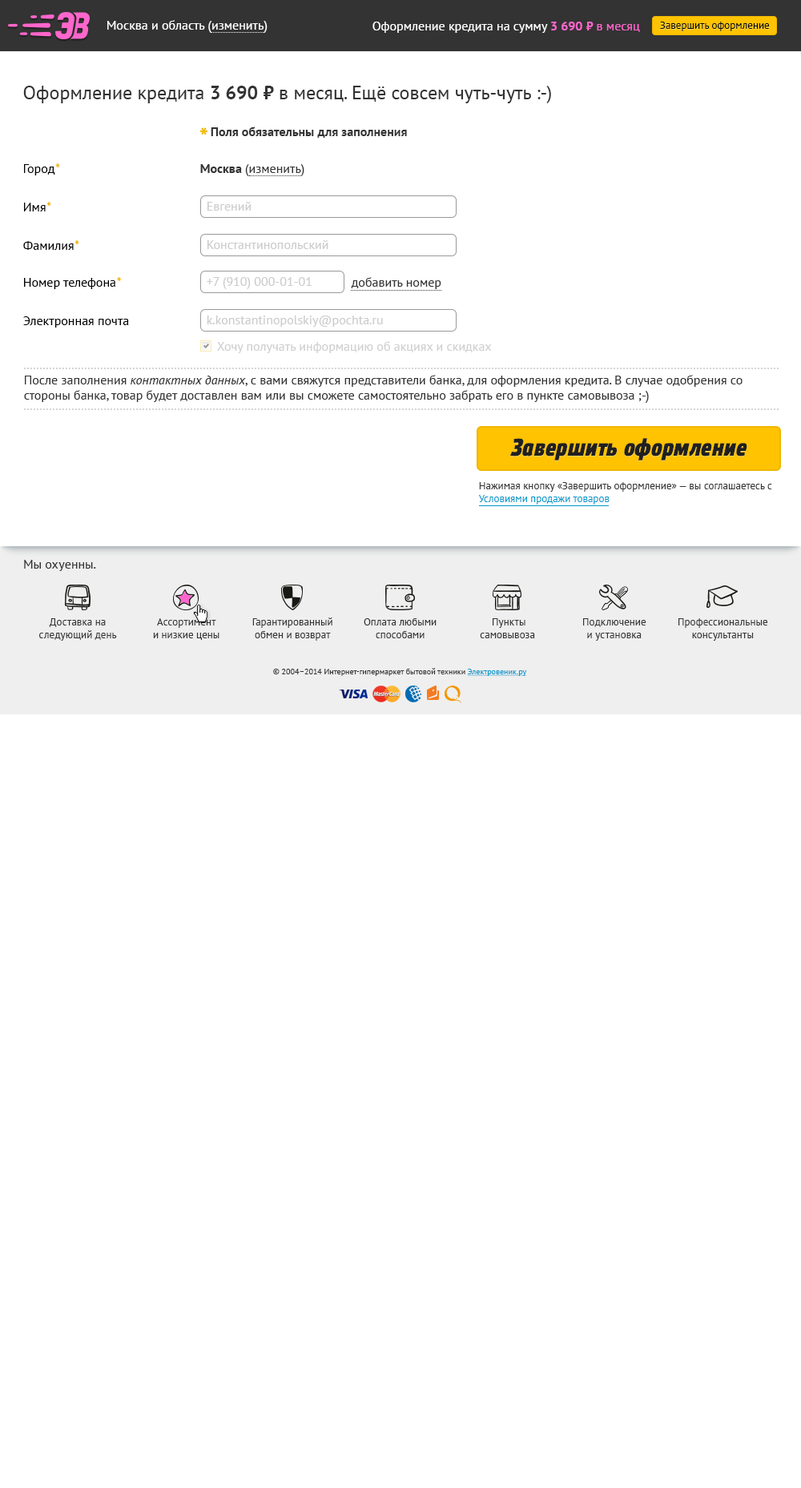
<style>
.page{position:relative;width:801px;height:1488px;background:#ffffff}
.page>*{position:absolute;margin:0}
.t1{font:12.8px "PTSans-Regular";color:#ffffff}
.t2{font:12.8px "PTSans-Bold";color:#ff66cc}
.t3{font:12.8px "PTSans-Regular";color:#ff66cc}
.t4{font:10.4px "PTSans-Regular";color:#000000}
.t5{font:19.2px "PTSans-Regular";color:#333333}
.t6{font:19.2px "PTSans-Bold";color:#333333}
.t7{font:12.8px "PTSans-Bold";color:#333333}
.t8{font:12.8px "PTSans-Regular";color:#000000}
.t9{font:12.8px "PTSans-BoldItalic";color:#efb700}
.t10{font:12.8px "PTSans-Regular";color:#333333}
.t11{font:12.8px "PTSans-Regular";color:#cccccc}
.t12{font:12.8px "PTSans-Regular";color:#d0d0d0}
.t13{font:12.8px "PTSans-Italic";color:#333333}
.t14{font:24px "EtelkaNarrowMedium-BoldItalic";letter-spacing:0.025em;color:#202020}
.t15{font:10.4px/12.8px "PTSans-Regular";color:#333333}
.t16{font:10.4px/12.8px "PTSans-Regular";color:#0099cc}
.t17{font:10.4px/12.9px "PTSans-Regular";color:#333333}
.t18{font:10.5px/12.9px "PTSans-Regular";color:#333333}
.t19{font:8px "PTSans-Regular";color:#333333}
.t20{font:8px "PTSans-Regular";color:#0099cc;text-decoration:underline}
</style>
<div class="page">
<p class="t1" style="left:107px;top:20px;width:161px;height:13px">Москва и область (изменить)</p>
<p class="t1" style="left:373px;top:22px;width:267px;height:11px">Оформление кредита на сумму <span class="t2">3 690 ⃏ </span><span class="t3">в месяц</span></p>
<p class="t4" style="left:660px;top:22px;width:110px;height:9px">Завершить оформление</p>
<p class="t5" style="left:23px;top:86px;width:528px;height:17px">Оформление кредита <span class="t6">3 690 ⃏ </span>в месяц. Ещё совсем чуть-чуть :-)</p>
<p class="t7" style="left:211px;top:127px;width:196px;height:11px">Поля обязательны для заполнения</p>
<p class="t8" style="left:24px;top:163px;width:36px;height:12px">Город<span class="t9">*</span></p>
<p class="t10" style="left:200px;top:164px;width:104px;height:12px"><span class="t7">Москва </span>(изменить)</p>
<p class="t8" style="left:24px;top:202px;width:27px;height:9px">Имя<span class="t9">*</span></p>
<p class="t11" style="left:207px;top:202px;width:45px;height:9px">Евгений</p>
<p class="t8" style="left:23px;top:240px;width:56px;height:10px">Фамилия<span class="t9">*</span></p>
<p class="t11" style="left:207px;top:240px;width:121px;height:9px">Константинопольский</p>
<p class="t8" style="left:24px;top:277px;width:98px;height:12px">Номер телефона<span class="t9">*</span></p>
<p class="t11" style="left:207px;top:277px;width:105px;height:12px">+7 (910) 000-01-01</p>
<p class="t10" style="left:351px;top:277px;width:90px;height:12px">добавить номер</p>
<p class="t8" style="left:23px;top:316px;width:106px;height:12px">Электронная почта</p>
<p class="t11" style="left:207px;top:316px;width:176px;height:11px">k.konstantinopolskiy@pochta.ru</p>
<p class="t12" style="left:217px;top:341px;width:275px;height:12px">Хочу получать информацию об акциях и скидках</p>
<p class="t10" style="left:24px;top:375px;width:719px;height:28px">После заполнения <span class="t13">контактных данных</span>, с вами свяжутся представители банка, для оформления кредита. В случае одобрения со<br>стороны банка, товар будет доставлен вам или вы сможете самостоятельно забрать его в пункте самовывоза ;-)</p>
<p class="t14" style="left:510px;top:438px;width:237px;height:23px">Завершить оформление</p>
<p class="t15" style="left:478px;top:482px;width:294px;height:23px">Нажимая кнопку «Завершить оформление» — вы соглашаетесь с<br><span class="t16">Условиями продажи товаров</span></p>
<p class="t10" style="left:24px;top:560px;width:72px;height:11px">Мы охуенны.</p>
<p class="t17" style="left:252px;top:618px;width:80px;height:23px;text-align:center">Гарантированный<br>обмен и возврат</p>
<p class="t17" style="left:39px;top:618px;width:78px;height:23px;text-align:center">Доставка на<br>следующий день</p>
<p class="t15" style="left:153px;top:618px;width:67px;height:22px;text-align:center">Ассортимент<br>и низкие цены</p>
<p class="t18" style="left:364px;top:618px;width:73px;height:20px;text-align:center">Оплата любыми<br>способами</p>
<p class="t15" style="left:480px;top:618px;width:55px;height:20px;text-align:center">Пункты<br>самовывоза</p>
<p class="t15" style="left:583px;top:618px;width:63px;height:23px;text-align:center">Подключение<br>и установка</p>
<p class="t17" style="left:679px;top:618px;width:89px;height:23px;text-align:center">Профессиональные<br>консультанты</p>
<p class="t19" style="left:273px;top:668px;width:254px;height:8px">© 2004–2014 Интернет-гипермаркет бытовой техники <span class="t20">Электровеник.ру</span></p>
</div>
